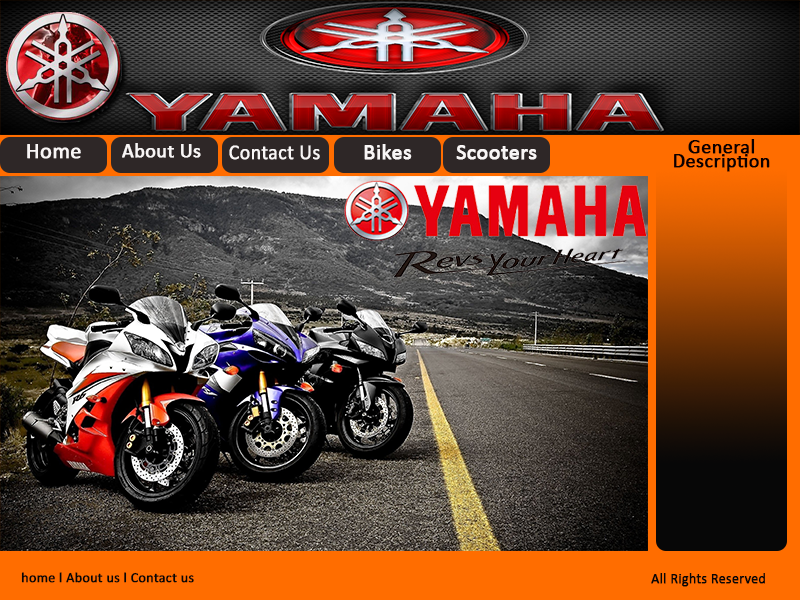
<style>
.page{position:relative;width:800px;height:600px}
.page>*{position:absolute;margin:0}
.t1{font:22px "Calibri";color:#f9f6f6;font-weight:bold}
.t2{font:20px "Calibri";color:#f9f6f6;font-weight:bold}
.t3{font:21.2px "Calibri";color:#f9f6f6;font-weight:bold;scale:0.93 1}
.t4{font:20px/14px "Calibri";color:#0a0000;font-weight:bold}
.t5{font:14.1px "Calibri";color:#070707;font-weight:bold}
.t6{font:14px "Calibri";color:#070707;font-weight:bold}
</style>
<div class="page">
<p class="t1" style="left:27px;top:144px;width:54px;height:15px">Home</p>
<p class="t2" style="left:122px;top:143px;width:79px;height:15px">About Us</p>
<p class="t3" style="left:229px;top:145px;width:91px;height:15px">Contact Us</p>
<p class="t1" style="left:364px;top:144px;width:48px;height:16px">Bikes</p>
<p class="t1" style="left:456px;top:145px;width:81px;height:15px">Scooters</p>
<p class="t4" style="left:674px;top:139px;width:96px;height:33px;text-align:center">General <br>Description</p>
<p class="t5" style="left:21px;top:572px;width:173px;height:11px">home l About us l Contact us</p>
<p class="t6" style="left:651px;top:573px;width:114px;height:14px">All Rights Reserved</p>
</div>
